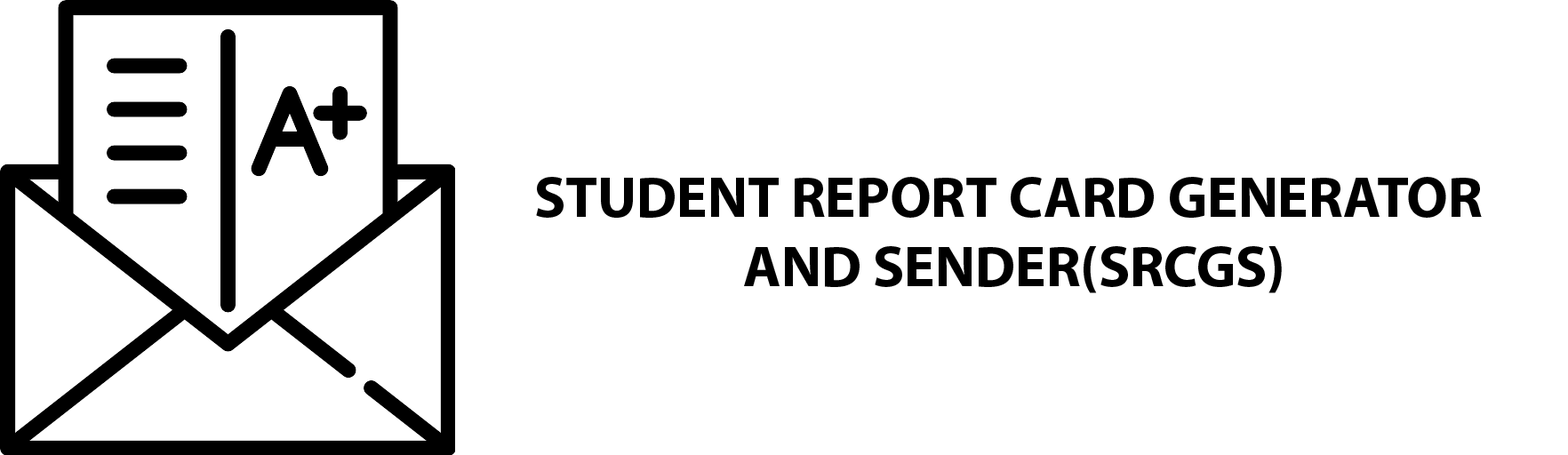
<style>
.page{position:relative;width:1568px;height:455px;background:#ffffff}
.page>*{position:absolute;margin:0}
.t1{font:57.8px "MyriadPro-Bold";color:#000000}
</style>
<div class="page">
<p class="t1" style="left:536px;top:177px;width:946px;height:116px;text-align:center">STUDENT REPORT CARD GENERATOR <br>AND SENDER(SRCGS)</p>
</div>
